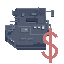
<style>
.page{position:relative;width:64px;height:64px;background:#ffffff}
.page>*{position:absolute;margin:0}
.t1{font:36px "FuturaLT-Book";color:#c77675}
</style>
<div class="page">
<p class="t1" style="left:41px;top:28px;width:17px;height:35px">$</p>
</div>
